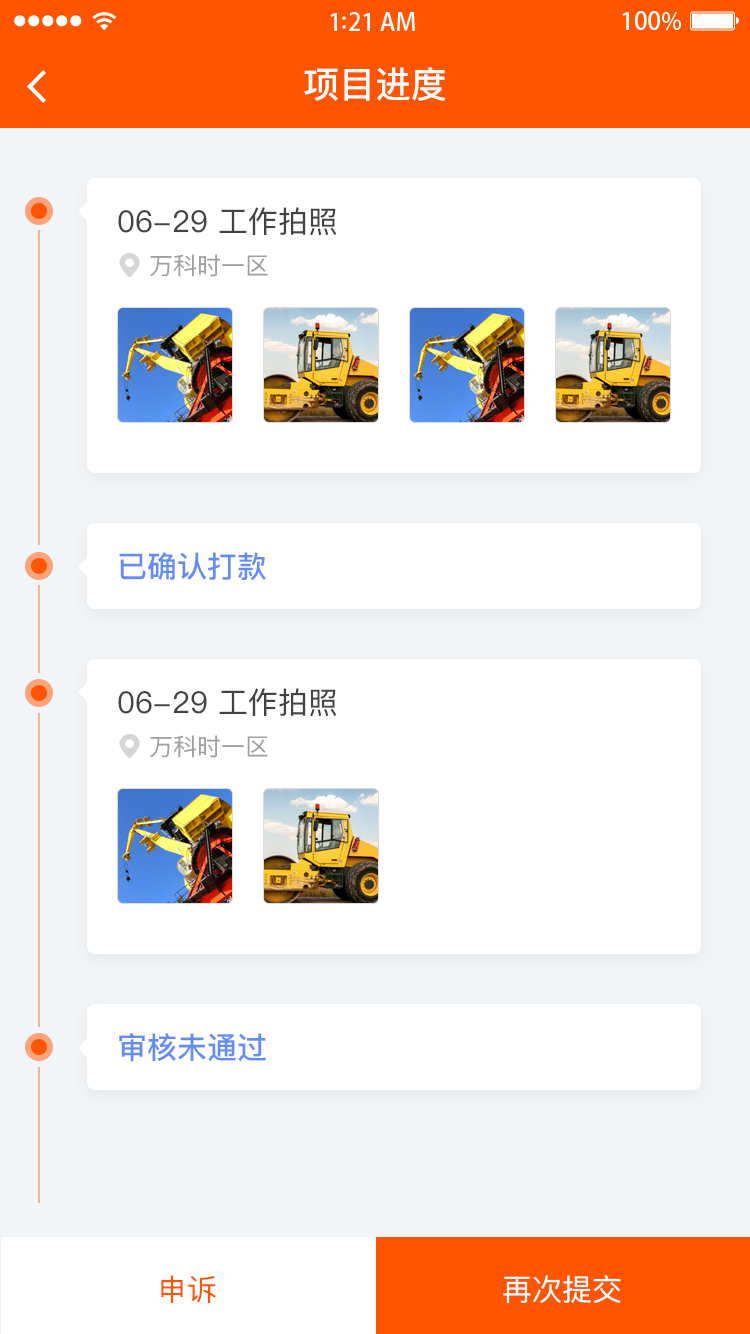
<style>
.page{position:relative;width:750px;height:1334px;background:#ffffff}
.page>*{position:absolute;margin:0}
.t1{font:36px "PingFangSC-Medium";color:#ffffff}
.t2{font:30px "PingFangSC-Regular";color:#434343}
.t3{font:24px "PingFangSC-Regular";color:#a0a0a0}
.t4{font:30px "PingFangSC-Medium";color:#648df4}
.t5{font:30px "PingFangSC-Regular";color:#ff5400}
.t6{font:30px "PingFangSC-Regular";color:#ffffff}
</style>
<div class="page">
<p class="t1" style="left:304px;top:67px;width:142px;height:34px">项目进度</p>
<p class="t2" style="left:118px;top:207px;width:219px;height:29px">06-29 工作拍照</p>
<p class="t3" style="left:150px;top:254px;width:118px;height:23px">万科时一区</p>
<p class="t4" style="left:119px;top:552px;width:147px;height:29px">已确认打款</p>
<p class="t2" style="left:118px;top:688px;width:219px;height:29px">06-29 工作拍照</p>
<p class="t3" style="left:150px;top:735px;width:118px;height:23px">万科时一区</p>
<p class="t4" style="left:119px;top:1033px;width:147px;height:29px">审核未通过</p>
<p class="t5" style="left:161px;top:1275px;width:55px;height:29px">申诉</p>
<p class="t6" style="left:503px;top:1275px;width:118px;height:29px">再次提交</p>
</div>
